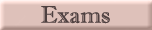
<style>
.page{position:relative;width:152px;height:30px;background:#dec1ba}
.page>*{position:absolute;margin:0}
.t1{font:24px "ImprintMT-Shadow";color:#4e4040}
</style>
<div class="page">
<p class="t1" style="left:41px;top:6px;width:69px;height:18px">Exams</p>
</div>
